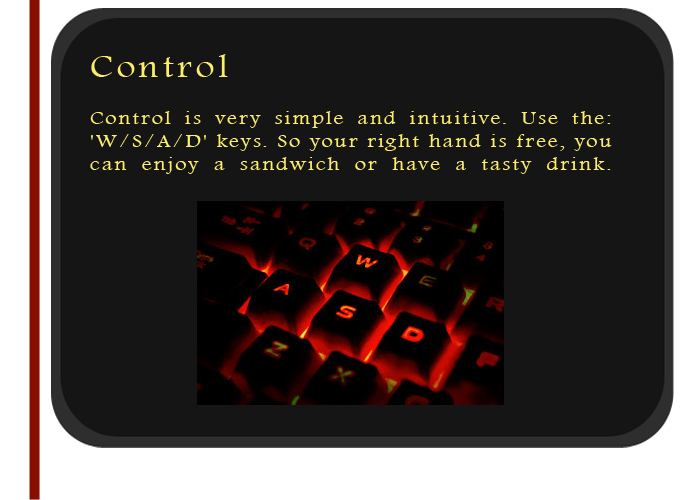
<style>
.page{position:relative;width:700px;height:500px;background:#151515}
.page>*{position:absolute;margin:0}
.t1{font:19.4px "FootlightMTLight";letter-spacing:0.1em;color:#fced6b;scale:1.12 1}
.t2{font:33.3px "FootlightMTLight";letter-spacing:0.1em;color:#fced6b;scale:1.12 1}
</style>
<div class="page">
<p class="t1" style="left:90px;top:54px;width:522px;height:120px"><span class="t2">Control<br></span><br>Control is very simple and intuitive. Use the:<br>'W/S/A/D' keys. So your right hand is free, you can enjoy a sandwich or have a tasty drink.</p>
</div>
